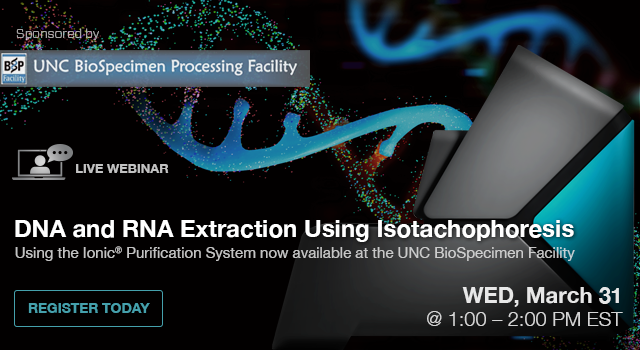
<style>
.page{position:relative;width:640px;height:350px;background:#020000}
.page>*{position:absolute;margin:0}
.t1{font:13px "Forza-Light";color:#a4a3a3}
.t2{font:13px "HelveticaNeue-Bold";color:#c2c2c2;text-transform:uppercase}
.t3{font:24px "HelveticaNeue-Bold";color:#ffffff}
.t4{font:15px "HelveticaNeue";color:#c2c2c2}
.t5{font:22px "HelveticaNeue-Bold";color:#e7e7e8}
.t6{font:14.1px "HelveticaNeue-Bold";letter-spacing:-0.01em;color:#45a0ac;text-transform:uppercase}
.t7{font:20px "HelveticaNeue-Light";color:#d5d5d5}
</style>
<div class="page">
<p class="t1" style="left:16px;top:28px;width:83px;height:12px">Sponsored by</p>
<p class="t2" style="left:76px;top:164px;width:93px;height:9px">Live Webinar</p>
<p class="t3" style="left:15px;top:220px;width:559px;height:22px">DNA and RNA Extraction Using Isotachophoresis</p>
<p class="t4" style="left:15px;top:246px;width:560px;height:15px">Using the Ionic® Purification System now available at the UNC BioSpecimen Facility</p>
<p class="t5" style="left:462px;top:287px;width:157px;height:20px">WED, March 31</p>
<p class="t6" style="left:28px;top:303px;width:122px;height:10px">Register Today</p>
<p class="t7" style="left:427px;top:311px;width:196px;height:15px">@ 1:00 – 2:00 PM EST</p>
</div>
